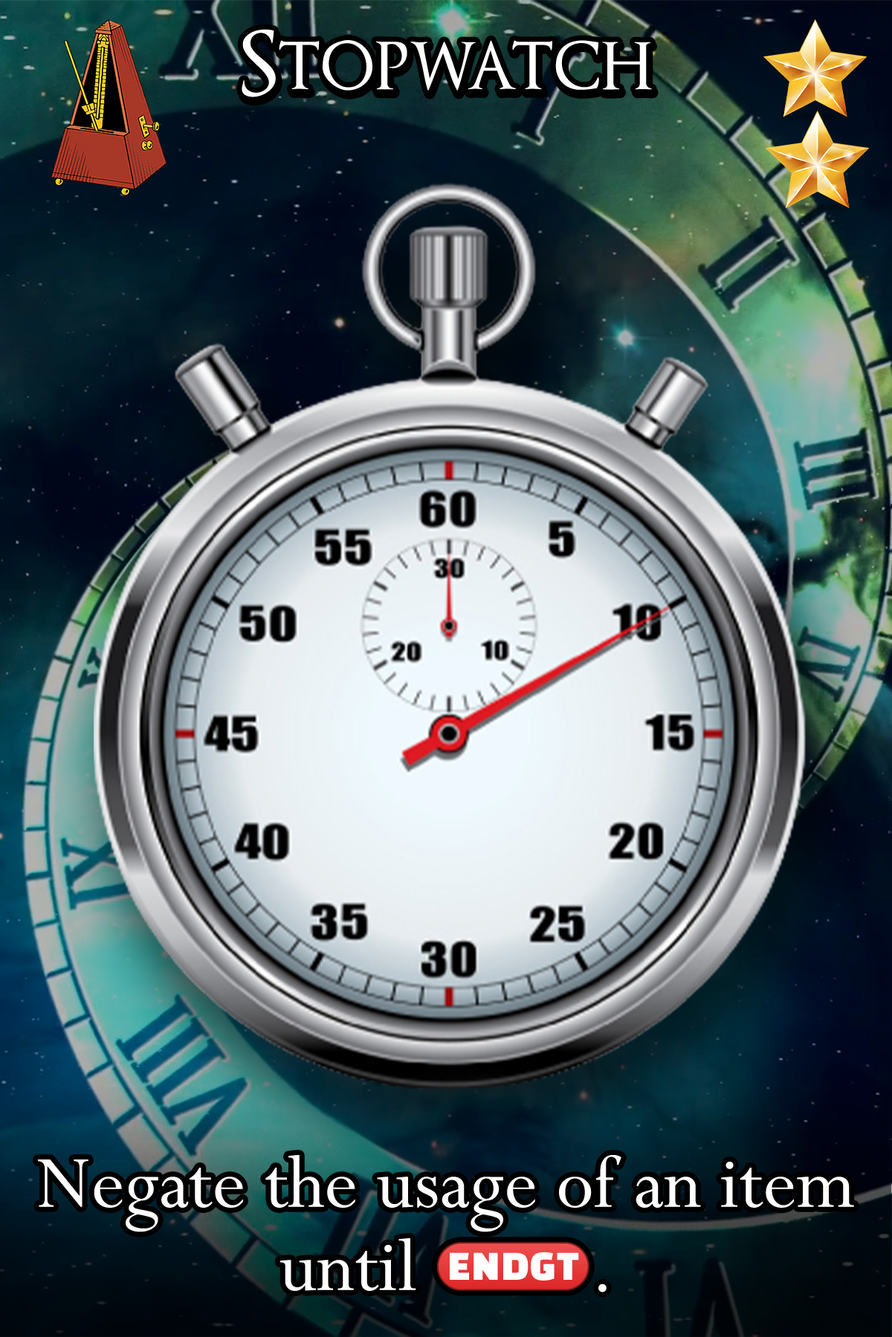
<style>
.page{position:relative;width:892px;height:1337px}
.page>*{position:absolute;margin:0}
.t1{font:148.6px "OptimusPrinceps";color:#ffffff}
.t2{font:141.2px "Perpetua";color:#ffffff}
.t3{font:85.1px "stoogedings-Regular";color:#ffffff}
</style>
<div class="page">
<p class="t1" style="left:241px;top:29px;width:411px;height:68px">Stopwatch</p>
<p class="t2" style="left:38px;top:1155px;width:816px;height:138px">Negate the usage of an item until <span class="t3">(ENDGT)</span>.</p>
</div>
